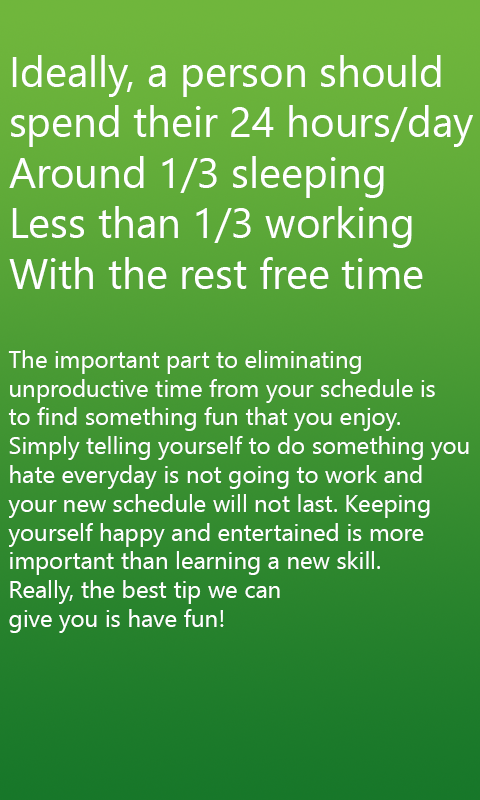
<style>
.page{position:relative;width:480px;height:800px}
.page>*{position:absolute;margin:0}
.t1{font:24px "SegoeUIHistoric";color:#ffffff}
.t2{font:42px "SegoeUIHistoric";color:#ffffff}
</style>
<div class="page">
<p class="t1" style="left:8px;top:55px;width:465px;height:578px"><span class="t2">Ideally, a person should<br>spend their 24 hours/day<br>Around 1/3 sleeping<br>Less than 1/3 working<br>With the rest free time<br><br></span>The important part to eliminating <br>unproductive time from your schedule is<br>to find something fun that you enjoy.<br>Simply telling yourself to do something you <br>hate everyday is not going to work and<br>your new schedule will not last. Keeping<br>yourself happy and entertained is more<br>important than learning a new skill.<br>Really, the best tip we can<br>give you is have fun!</p>
</div>
